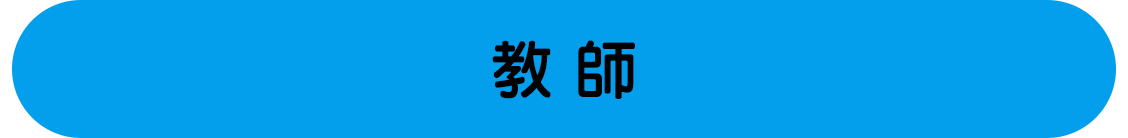
<style>
.page{position:relative;width:1128px;height:138px;background:#039fed}
.page>*{position:absolute;margin:0}
.t1{font:62.5px "DFLiYuanStd-W7";color:#000000}
</style>
<div class="page">
<p class="t1" style="left:492px;top:40px;width:143px;height:59px">教 師</p>
</div>
